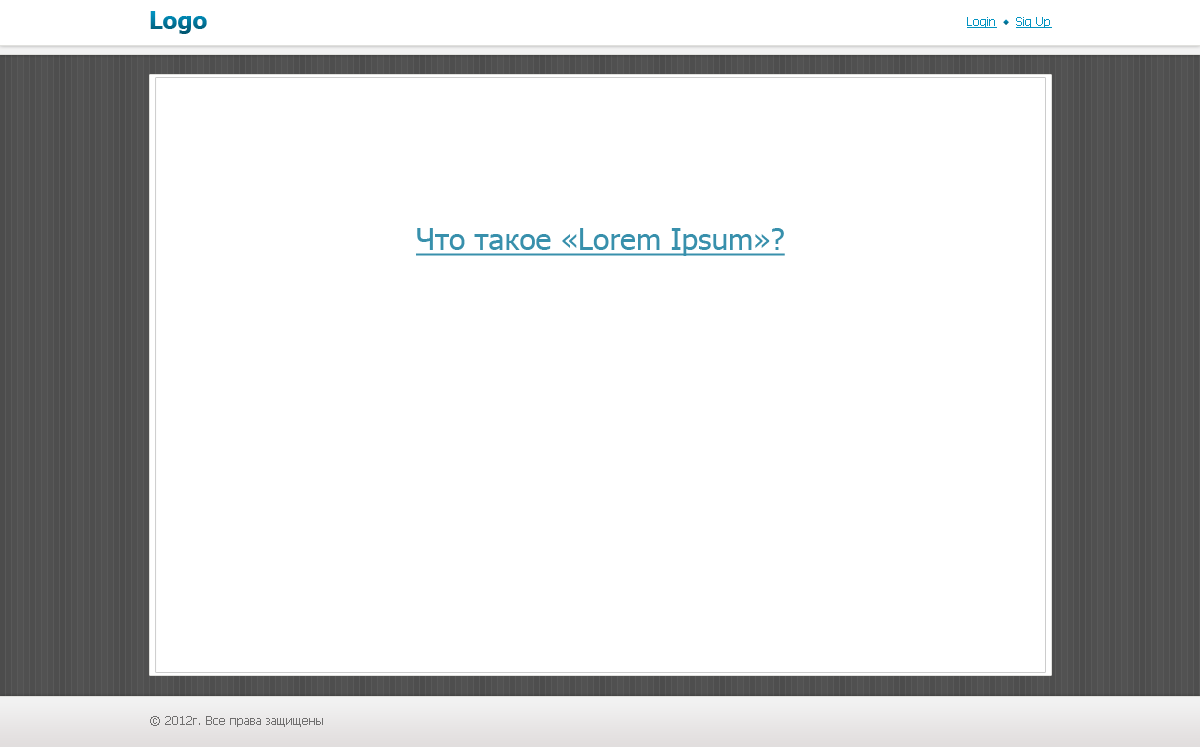
<style>
.page{position:relative;width:1200px;height:747px;background:#ffffff}
.page>*{position:absolute;margin:0}
.t1{font:24px "Tahoma-Bold"}
.t2{font:12px "Tahoma";color:#0293c1;text-decoration:underline}
.t3{font:30px "Tahoma";color:#3890ac;text-decoration:underline}
.t4{font:12px "Tahoma";color:#706f6f}
</style>
<div class="page">
<p class="t1" style="left:150px;top:11px;width:57px;height:23px">Logo</p>
<p class="t2" style="left:967px;top:17px;width:85px;height:11px">Login     Sig Up</p>
<p class="t3" style="left:416px;top:228px;width:369px;height:28px">Что такое «Lorem Ipsum»?</p>
<p class="t4" style="left:150px;top:716px;width:173px;height:11px">© 2012г. Все права защищены</p>
</div>
